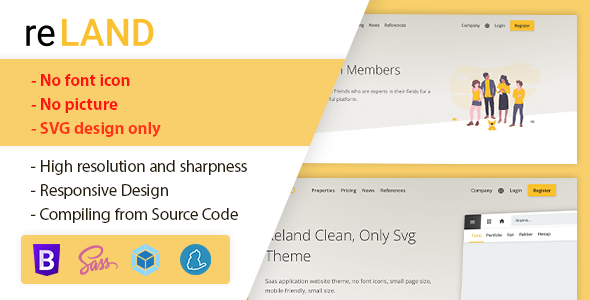
<style>
.page{position:relative;width:590px;height:300px;background:#ffffff}
.page>*{position:absolute;margin:0}
.t1{font:17px/24px "MyriadPro-Bold";color:#ff1313}
.t2{font:17px/24px "MyriadPro-Bold";color:#fe3318}
.t3{font:17px/24px "MyriadPro-Regular";color:#28200c}
</style>
<div class="page">
<p class="t1" style="left:31px;top:74px;width:130px;height:63px">- No font icon<br>- No picture<br><span class="t2">- SVG design only</span></p>
<p class="t3" style="left:31px;top:160px;width:216px;height:63px">- High resolution and sharpness<br>- Responsive Design<br>- Compiling from Source Code</p>
</div>
